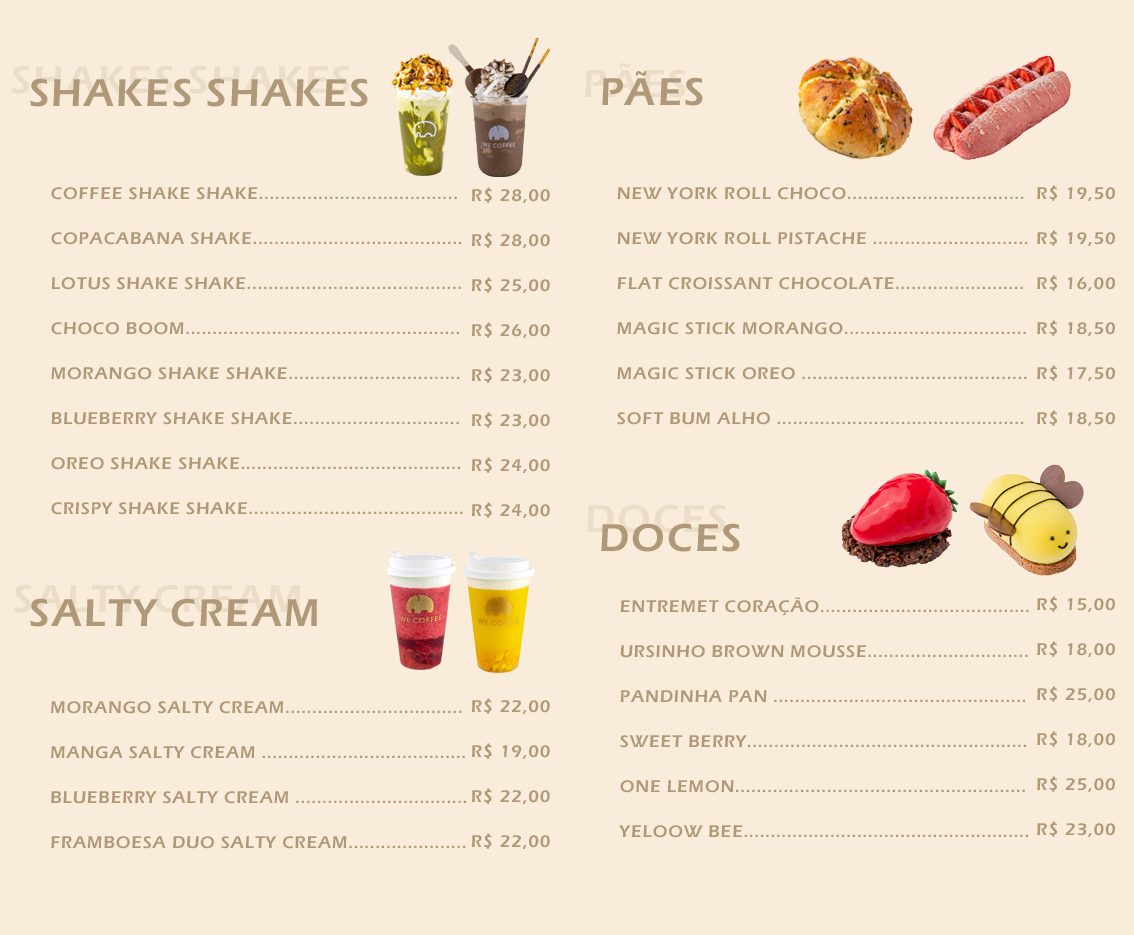
<style>
.page{position:relative;width:1134px;height:935px;background:#faecda}
.page>*{position:absolute;margin:0}
.t1{font:40px "ErasITC-Demi";letter-spacing:0.05em;color:#b09979}
.t2{font:17.5px/45px "ErasITC-Demi";letter-spacing:0.05em;color:#b09979}
</style>
<div class="page">
<p class="t1" style="left:30px;top:78px;width:338px;height:29px">SHAKES SHAKES</p>
<p class="t1" style="left:602px;top:71px;width:101px;height:35px">PÃES</p>
<p class="t2" style="left:1037px;top:185px;width:78px;height:241px">R$ 19,50<br>R$ 19,50<br>R$ 16,00<br>R$ 18,50<br>R$ 17,50<br>R$ 18,50</p>
<p class="t2" style="left:51px;top:187px;width:412px;height:328px">COFFEE SHAKE SHAKE.....................................<br>COPACABANA SHAKE.......................................<br>LOTUS SHAKE SHAKE........................................<br>CHOCO BOOM...................................................<br>MORANGO SHAKE SHAKE................................<br>BLUEBERRY SHAKE SHAKE...............................<br>OREO SHAKE SHAKE.........................................<br>CRISPY SHAKE SHAKE........................................</p>
<p class="t2" style="left:472px;top:187px;width:78px;height:331px">R$ 28,00<br>R$ 28,00<br>R$ 25,00<br>R$ 26,00<br>R$ 23,00<br>R$ 23,00<br>R$ 24,00<br>R$ 24,00</p>
<p class="t2" style="left:617px;top:187px;width:411px;height:238px">NEW YORK ROLL CHOCO.................................<br>NEW YORK ROLL PISTACHE .............................<br>FLAT CROISSANT CHOCOLATE........................<br>MAGIC STICK MORANGO..................................<br>MAGIC STICK OREO ..........................................<br>SOFT BUM ALHO ..............................................</p>
<p class="t1" style="left:601px;top:523px;width:139px;height:29px">DOCES</p>
<p class="t1" style="left:30px;top:598px;width:287px;height:29px">SALTY CREAM</p>
<p class="t2" style="left:619px;top:597px;width:410px;height:241px">ENTREMET CORAÇÃO.......................................<br>URSINHO BROWN MOUSSE..............................<br>PANDINHA PAN ...............................................<br>SWEET BERRY....................................................<br>ONE LEMON......................................................<br>YELOOW BEE.....................................................</p>
<p class="t2" style="left:1037px;top:596px;width:78px;height:241px">R$ 15,00<br>R$ 18,00<br>R$ 25,00<br>R$ 18,00<br>R$ 25,00<br>R$ 23,00</p>
<p class="t2" style="left:51px;top:701px;width:415px;height:148px">MORANGO SALTY CREAM.................................<br>MANGA SALTY CREAM ......................................<br>BLUEBERRY SALTY CREAM ................................<br>FRAMBOESA DUO SALTY CREAM......................</p>
<p class="t2" style="left:472px;top:698px;width:78px;height:151px">R$ 22,00<br>R$ 19,00<br>R$ 22,00<br>R$ 22,00</p>
</div>
